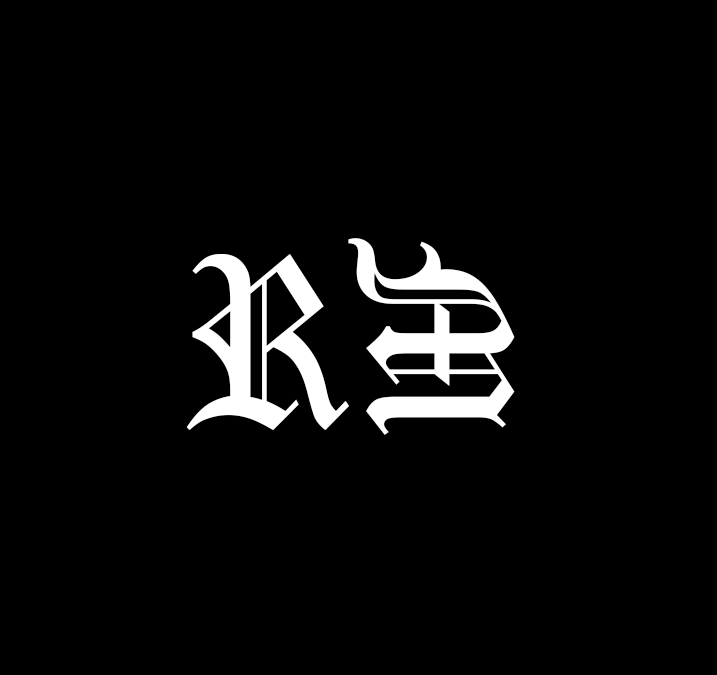
<style>
.page{position:relative;width:717px;height:675px;background:#000000}
.page>*{position:absolute;margin:0}
.t1{font:200px "OldEnglishTextMT";letter-spacing:0.05em;color:#ffffff}
.t2{font:243px "OldEnglishTextMT";letter-spacing:0.05em;color:#ffffff;scale:0.82 1}
</style>
<div class="page">
<p class="t1" style="left:348px;top:238px;width:167px;height:197px;rotate:90deg">M</p>
<p class="t2" style="left:186px;top:254px;width:163px;height:176px">R</p>
</div>
